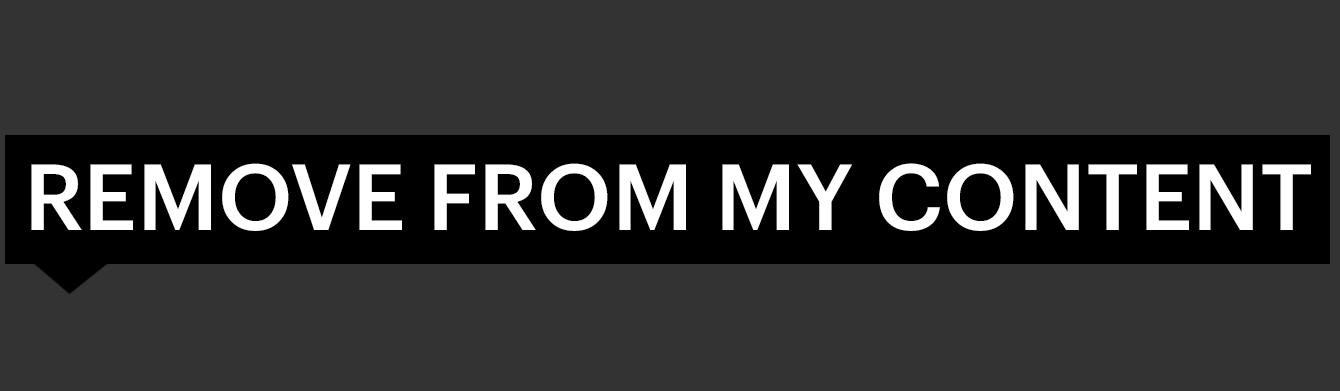
<style>
.page{position:relative;width:1340px;height:391px;background:#333333}
.page>*{position:absolute;margin:0}
.t1{font:91.5px "GraphikLCG-Medium";color:#ffffff}
</style>
<div class="page">
<p class="t1" style="left:31px;top:163px;width:1280px;height:68px">REMOVE FROM MY CONTENT</p>
</div>
